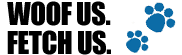
<style>
.page{position:relative;width:182px;height:55px;background:#ffffff}
.page>*{position:absolute;margin:0}
.t1{font:29.1px/14.5px "Impact";letter-spacing:-0.025em;color:#000000}
</style>
<div class="page">
<p class="t1" style="left:7px;top:1px;width:104px;height:54px;text-align:center">WOOF US.<br><br>FETCH US.</p>
</div>
